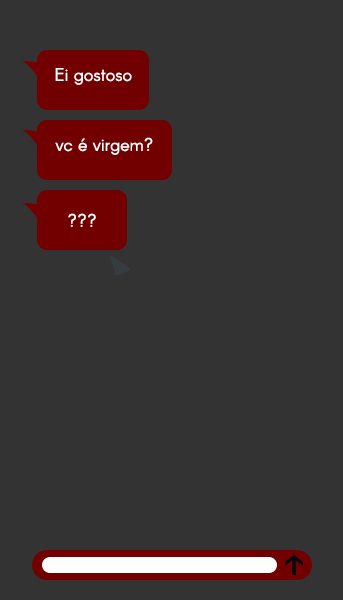
<style>
.page{position:relative;width:343px;height:600px;background:#333333}
.page>*{position:absolute;margin:0}
.t1{font:18px "Arcon-Regular";letter-spacing:-0.004em;color:#ffffff}
.t2{font:18px "Arcon-Regular";letter-spacing:-0.003em;color:#ffffff}
</style>
<div class="page">
<p class="t1" style="left:55px;top:68px;width:77px;height:17px">Ei gostoso</p>
<p class="t2" style="left:55px;top:137px;width:98px;height:18px">vc é virgem?</p>
<p class="t2" style="left:68px;top:213px;width:28px;height:14px">???</p>
</div>
